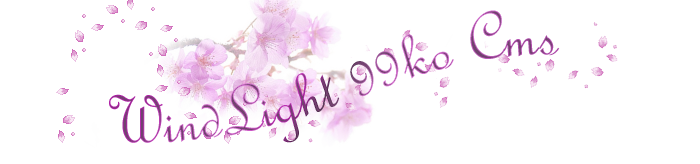
<style>
.page{position:relative;width:700px;height:164px;background:#ffffff}
.page>*{position:absolute;margin:0}
.t1{font:72px/100px "FrenchScriptMT"}
</style>
<div class="page">
<p class="t1" style="left:109px;top:10px;width:451px;height:133px;text-align:center">WindLight 99ko Cms</p>
</div>
